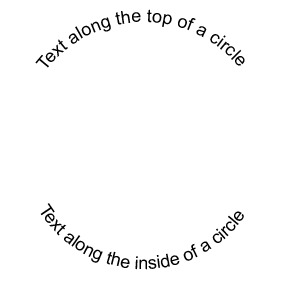
<style>
.page{position:relative;width:287px;height:284px;background:#ffffff}
.page>*{position:absolute;margin:0}
.t1{font:18px/37.1px "ArialMT";color:#000000}
</style>
<div class="page">
<p class="t1" style="left:35px;top:9px;width:210px;height:59px">Text along the top of a circle</p>
<p class="t1" style="left:40px;top:203px;width:204px;height:67px">Text along the inside of a circle</p>
</div>
